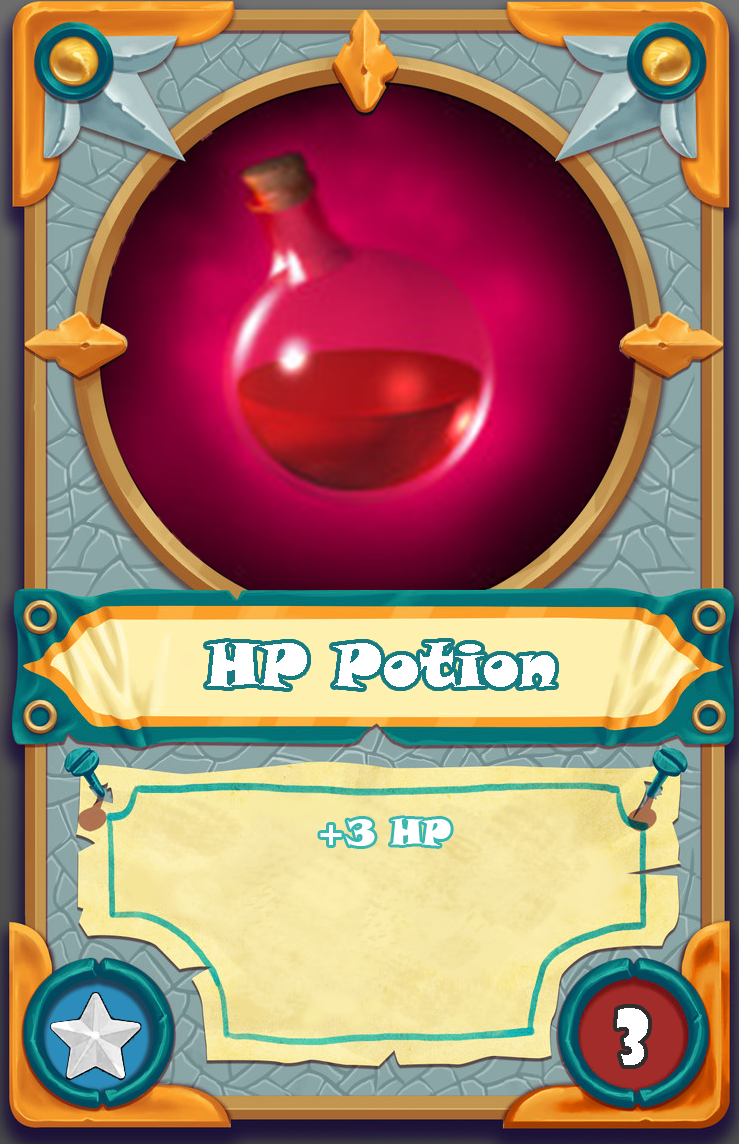
<style>
.page{position:relative;width:739px;height:1144px}
.page>*{position:absolute;margin:0}
.t1{font:60px "SnapITC-Regular";color:#ffffff}
.t2{font:36px "SnapITC-Regular";color:#ffffff}
.t3{font:72px "ShowcardGothic-Reg";color:#ffffff}
</style>
<div class="page">
<p class="t1" style="left:207px;top:642px;width:348px;height:46px">HP Potion</p>
<p class="t2" style="left:320px;top:818px;width:131px;height:28px">+3 HP</p>
<p class="t3" style="left:617px;top:1008px;width:31px;height:57px">3</p>
</div>
